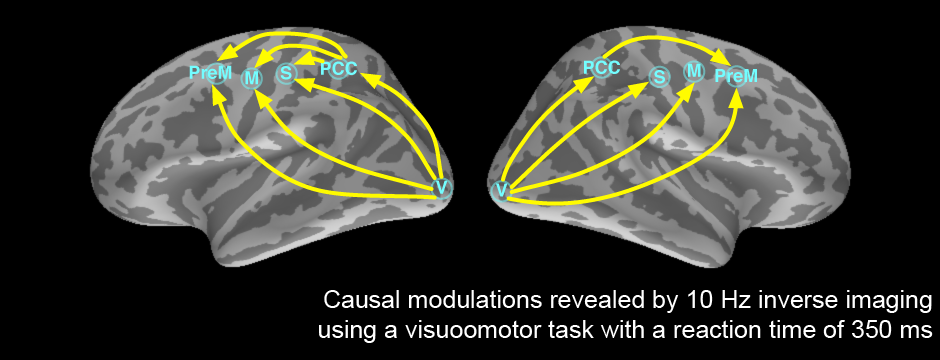
<style>
.page{position:relative;width:940px;height:360px;background:#000000}
.page>*{position:absolute;margin:0}
.t1{font:25px "ArialMT";color:#ffffff}
</style>
<div class="page">
<p class="t1" style="left:319px;top:290px;width:614px;height:53px;text-align:right">Causal modulations revealed by 10 Hz inverse imaging<br>using a visuoomotor task with a reaction time of 350 ms</p>
</div>
